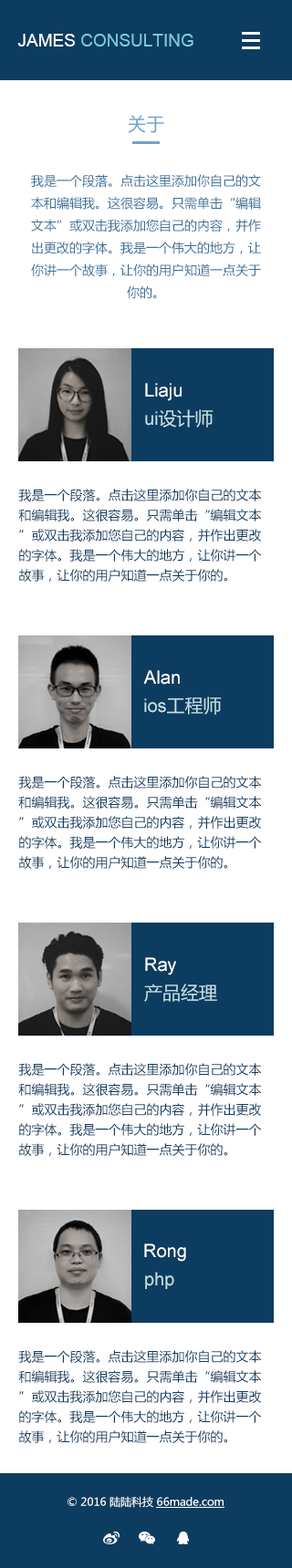
<style>
.page{position:relative;width:292px;height:1568px;background:#ffffff}
.page>*{position:absolute;margin:0}
.t1{font:17.3px "ArialMT";color:#79cada}
.t2{font:17.3px "ArialMT";color:#ffffff}
.t3{font:18.2px "MicrosoftYaHei";color:#6ea4ca}
.t4{font:12.8px "MicrosoftYaHei";color:#39729b}
.t5{font:18.2px "ArialMT";color:#feffff}
.t6{font:18.2px "MicrosoftYaHei";color:#c4e0e2}
.t7{font:18.2px "ArialMT";color:#c4e0e2}
.t8{font:12.8px/20.1px "MicrosoftYaHei";color:#0c3c60}
.t9{font:10.9px "MicrosoftYaHei";color:#ffffff}
</style>
<div class="page">
<p class="t1" style="left:17px;top:34px;width:176px;height:12px"><span class="t2">JAMES </span>CONSULTING</p>
<p class="t3" style="left:128px;top:115px;width:36px;height:18px">关于</p>
<p class="t4" style="left:31px;top:174px;width:230px;height:125px;text-align:center">我是一个段落。点击这里添加你自己的文本和编辑我。这很容易。只需单击“编辑文本”或双击我添加您自己的内容，并作出更改的字体。我是一个伟大的地方，让你讲一个故事，让你的用户知道一点关于你的。</p>
<p class="t5" style="left:145px;top:383px;width:36px;height:18px">Liaju</p>
<p class="t6" style="left:145px;top:409px;width:68px;height:19px"><span class="t7">ui</span>设计师</p>
<p class="t8" style="left:18px;top:489px;width:244px;height:93px">我是一个段落。点击这里添加你自己的文本和编辑我。这很容易。只需单击“编辑文本”或双击我添加您自己的内容，并作出更改的字体。我是一个伟大的地方，让你讲一个故事，让你的用户知道一点关于你的。</p>
<p class="t5" style="left:143px;top:670px;width:37px;height:15px">Alan</p>
<p class="t7" style="left:144px;top:696px;width:78px;height:19px">ios<span class="t6">工程师</span></p>
<p class="t8" style="left:18px;top:776px;width:244px;height:93px">我是一个段落。点击这里添加你自己的文本和编辑我。这很容易。只需单击“编辑文本”或双击我添加您自己的内容，并作出更改的字体。我是一个伟大的地方，让你讲一个故事，让你的用户知道一点关于你的。</p>
<p class="t5" style="left:145px;top:957px;width:31px;height:18px">Ray</p>
<p class="t6" style="left:144px;top:984px;width:73px;height:18px">产品经理</p>
<p class="t8" style="left:18px;top:1063px;width:244px;height:93px">我是一个段落。点击这里添加你自己的文本和编辑我。这很容易。只需单击“编辑文本”或双击我添加您自己的内容，并作出更改的字体。我是一个伟大的地方，让你讲一个故事，让你的用户知道一点关于你的。</p>
<p class="t5" style="left:144px;top:1243px;width:42px;height:19px">Rong</p>
<p class="t7" style="left:145px;top:1272px;width:29px;height:17px">php</p>
<p class="t8" style="left:18px;top:1350px;width:244px;height:93px">我是一个段落。点击这里添加你自己的文本和编辑我。这很容易。只需单击“编辑文本”或双击我添加您自己的内容，并作出更改的字体。我是一个伟大的地方，让你讲一个故事，让你的用户知道一点关于你的。</p>
<p class="t9" style="left:67px;top:1496px;width:156px;height:12px">© 2016 陆陆科技 66made.com</p>
</div>
